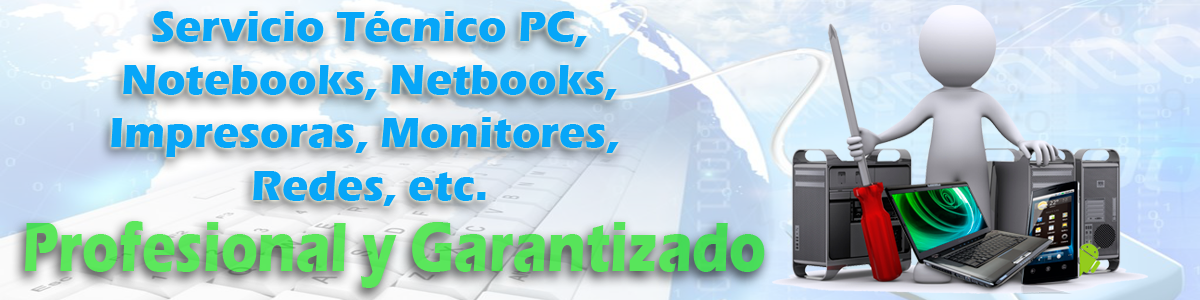
<style>
.page{position:relative;width:1200px;height:300px}
.page>*{position:absolute;margin:0}
.t1{font:44.1px "ErasITC-Bold";color:#07a6f8}
.t2{font:71.7px "ErasITC-Bold";color:#59e55a;scale:0.79 1}
</style>
<div class="page">
<p class="t1" style="left:111px;top:11px;width:508px;height:195px;text-align:center">Servicio Técnico PC,<br> Notebooks, Netbooks, <br>Impresoras, Monitores, <br>Redes, etc.</p>
<p class="t2" style="left:24px;top:221px;width:741px;height:67px">Profesional y Garantizado</p>
</div>
